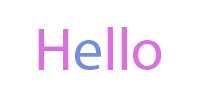
<style>
.page{position:relative;width:200px;height:100px;background:#ffffff}
.page>*{position:absolute;margin:0}
.t1{font:60px "MyriadPro-Regular";color:#d870df}
.t2{font:60px "MyriadPro-Regular";color:#708ddf}
</style>
<div class="page">
<p class="t1" style="left:38px;top:27px;width:124px;height:43px">H<span class="t2">e</span>llo</p>
</div>
